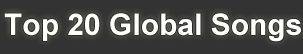
<style>
.page{position:relative;width:303px;height:54px;background:#333333}
.page>*{position:absolute;margin:0}
.t1{font:30px "Arial-BoldMT";color:#ffffff}
</style>
<div class="page">
<p class="t1" style="left:4px;top:13px;width:297px;height:29px">Top 20 Global Songs</p>
</div>
